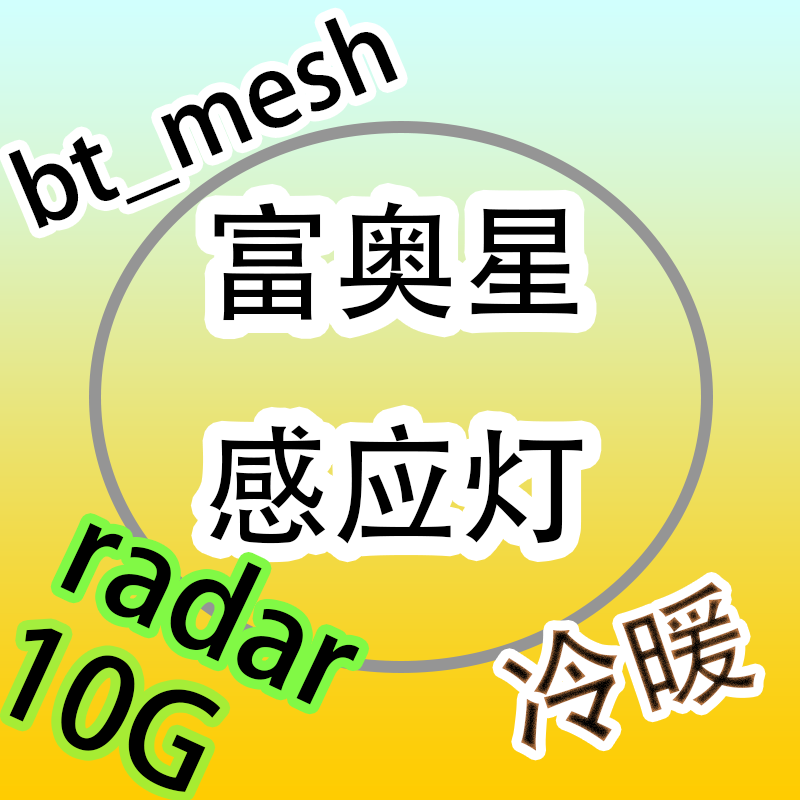
<style>
.page{position:relative;width:800px;height:800px}
.page>*{position:absolute;margin:0}
.t1{font:100px "AdobeHeitiStd-Regular";color:#000000}
.t2{font:128px "AdobeHeitiStd-Regular";color:#000000}
.t3{font:128px "AdobeHeitiStd-Regular"}
</style>
<div class="page">
<p class="t1" style="left:8px;top:17px;width:390px;height:212px;rotate:-23deg">bt_mesh</p>
<p class="t2" style="left:209px;top:201px;width:374px;height:343px">富奥星<br>感应灯</p>
<p class="t2" style="left:60px;top:523px;width:300px;height:182px;rotate:25deg">radar</p>
<p class="t3" style="left:502px;top:581px;width:254px;height:170px;rotate:-19deg">冷暖</p>
<p class="t2" style="left:9px;top:628px;width:212px;height:164px;rotate:25deg">10G</p>
</div>
